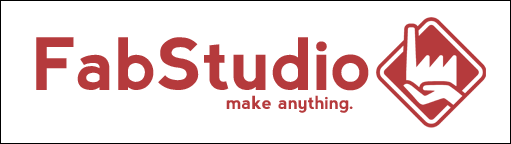
<style>
.page{position:relative;width:511px;height:144px;background:#ffffff}
.page>*{position:absolute;margin:0}
.t1{font:72px "nevis-Bold";color:#b53a3c}
.t2{font:18px "nevis-Bold";color:#b53a3c}
</style>
<div class="page">
<p class="t1" style="left:36px;top:37px;width:333px;height:54px">FabStudio</p>
<p class="t2" style="left:226px;top:95px;width:127px;height:18px">make anything.</p>
</div>
